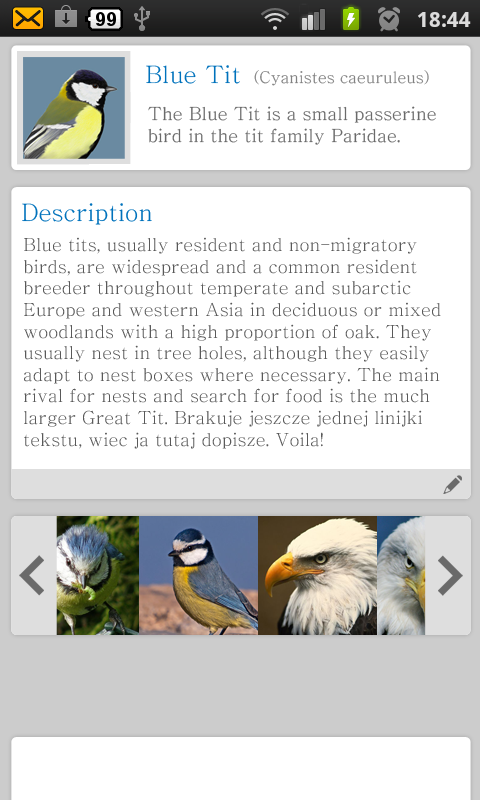
<style>
.page{position:relative;width:480px;height:800px;background:#ffffff}
.page>*{position:absolute;margin:0}
.t1{font:24px "Chrysanthi-Unicode";color:#0072bc}
.t2{font:16px "Chrysanthi-Unicode";color:#818181}
.t3{font:18px "Chrysanthi-Unicode";color:#6a6a6a}
.t4{font:18px "Chrysanthi-Unicode";color:#585858}
</style>
<div class="page">
<p class="t1" style="left:146px;top:65px;width:94px;height:19px">Blue Tit</p>
<p class="t2" style="left:254px;top:70px;width:175px;height:16px">(Cyanistes caeuruleus)</p>
<p class="t3" style="left:148px;top:106px;width:288px;height:39px">The Blue Tit is a small passerine bird in the tit family Paridae.</p>
<p class="t1" style="left:22px;top:203px;width:130px;height:22px">Description</p>
<p class="t4" style="left:24px;top:237px;width:417px;height:212px">Blue tits, usually resident and non-migratory birds, are widespread and a common resident breeder throughout temperate and subarctic Europe and western Asia in deciduous or mixed woodlands with a high proportion of oak. They usually nest in tree holes, although they easily adapt to nest boxes where necessary. The main rival for nests and search for food is the much larger Great Tit. Brakuje jeszcze jednej linijki tekstu, wiec ja tutaj dopisze. Voila!</p>
</div>
